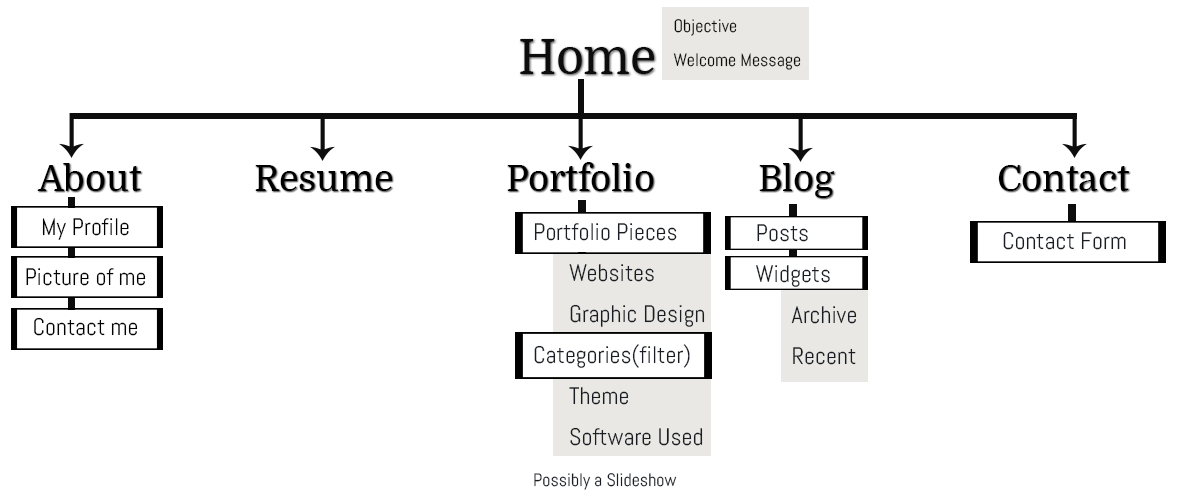
<style>
.page{position:relative;width:1200px;height:500px;background:#ffffff}
.page>*{position:absolute;margin:0}
.t1{font:18px/34px "Abel-Regular";color:#0d0d0d}
.t2{font:48px "Domine-Regular";color:#0d0d0d}
.t3{font:36px "Domine-Regular";color:#000000}
.t4{font:24px/25px "Abel-Regular";color:#000000}
.t5{font:24px/41px "Abel-Regular";color:#1a1e24}
.t6{font:18px/41px "Abel-Regular";color:#1a1e24}
.t7{font:24px "Abel-Regular";color:#1a1e24}
</style>
<div class="page">
<p class="t1" style="left:673px;top:19px;width:128px;height:51px">Objective<br>Welcome Message</p>
<p class="t2" style="left:520px;top:39px;width:134px;height:35px">Home</p>
<p class="t3" style="left:37px;top:162px;width:1092px;height:36px">About    Resume    Portfolio   Blog   Contact</p>
<p class="t4" style="left:26px;top:218px;width:120px;height:118px;text-align:center">My Profile<br><br>Picture of me<br><br>Contact me</p>
<p class="t5" style="left:534px;top:223px;width:171px;height:267px">Portfolio Pieces<br> Websites<br> Graphic Design<br>Categories(filter)<br> Theme<br> Software Used<br><span class="t6">Possibly a Slideshow</span></p>
<p class="t5" style="left:756px;top:224px;width:101px;height:141px">Posts<br>Widgets<br> Archive<br> Recent</p>
<p class="t7" style="left:1003px;top:231px;width:123px;height:19px">Contact Form</p>
</div>
